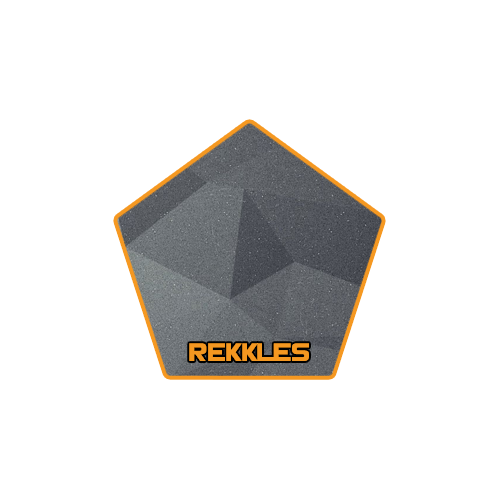
<style>
.page{position:relative;width:500px;height:500px;background:#ffffff}
.page>*{position:absolute;margin:0}
.t1{font:22px "HyundaiNormal";color:#f49720}
</style>
<div class="page">
<p class="t1" style="left:189px;top:343px;width:120px;height:18px">Rekkles</p>
</div>
